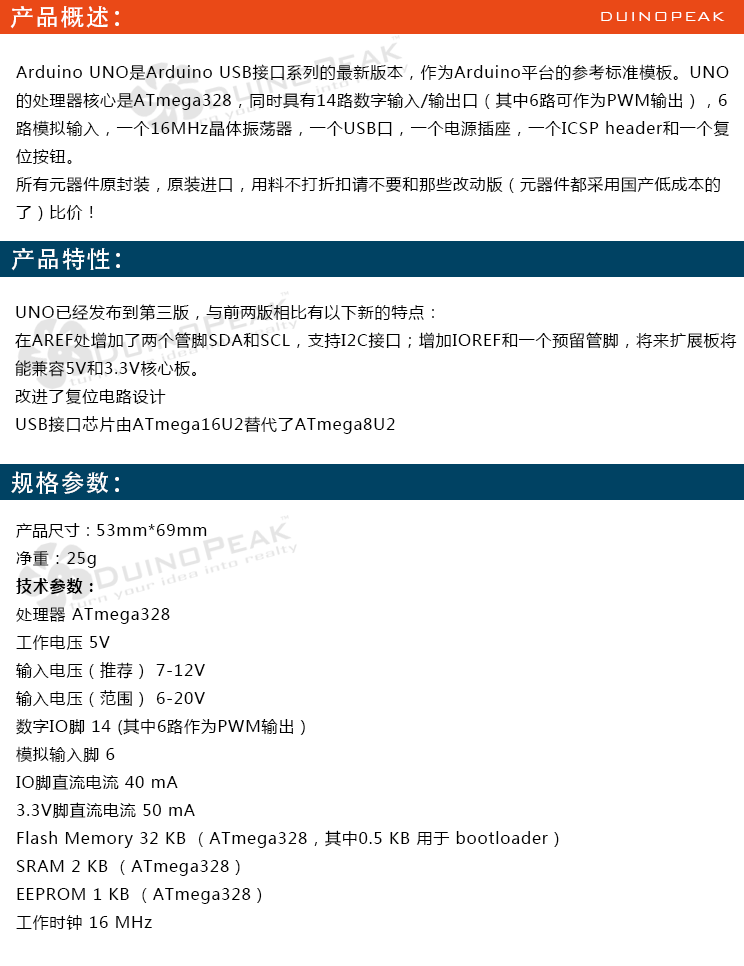
<style>
.page{position:relative;width:744px;height:966px;background:#ffffff}
.page>*{position:absolute;margin:0}
.t1{font:24px "AdobeHeitiStd-Regular";letter-spacing:0.05em;color:#ffffff}
.t2{font:18px "BankGothicBT-Light";letter-spacing:0.05em;color:#ffffff}
.t3{font:16px "MicrosoftYaHei";letter-spacing:0.05em;color:#000000}
.t4{font:16px "MicrosoftYaHei";color:#000000}
.t5{font:16px "MicrosoftYaHei-Bold";letter-spacing:0.05em;color:#000000}
</style>
<div class="page">
<p class="t1" style="left:10px;top:6px;width:109px;height:23px">产品概述：</p>
<p class="t2" style="left:601px;top:12px;width:124px;height:9px">DUINOPEAK</p>
<p class="t3" style="left:16px;top:64px;width:713px;height:157px">Arduino UNO是Arduino USB接口系列的最新版本，作为Arduino平台的参考标准模板。UNO<br>的处理器核心是ATmega328，同时具有14路数字输入/输出口（其中6路可作为PWM输出），6<br>路模拟输入，一个16MHz晶体振荡器，一个USB口，一个电源插座，一个ICSP header和一个复<br>位按钮。<br>所有元器件原封装，原装进口，用料不打折扣请不要和那些改动版（元器件都采用国产低成本的<br>了）比价！</p>
<p class="t1" style="left:11px;top:247px;width:109px;height:24px">产品特性：</p>
<p class="t3" style="left:15px;top:304px;width:722px;height:130px">UNO已经发布到第三版，与前两版相比有以下新的特点：<br>在AREF处增加了两个管脚SDA和SCL，支持I2C接口；增加IOREF和一个预留管脚，将来扩展板将<br>能兼容5V和3.3V核心板。<br>改进了复位电路设计<br>USB接口芯片由ATmega16U2替代了ATmega8U2</p>
<p class="t1" style="left:11px;top:471px;width:108px;height:23px">规格参数：</p>
<p class="t3" style="left:16px;top:523px;width:543px;height:407px"><span class="t4">产品尺寸：</span>53mm*69mm<br>净重：25g<br><span class="t5">技术参数：<br></span>处理器 ATmega328<br>工作电压 5V<br>输入电压（推荐） 7-12V<br>输入电压（范围） 6-20V<br>数字IO脚 14 (其中6路作为PWM输出）<br>模拟输入脚 6<br>IO脚直流电流 40 mA<br>3.3V脚直流电流 50 mA<br>Flash Memory 32 KB （ATmega328，其中0.5 KB 用于 bootloader）<br>SRAM 2 KB （ATmega328）<br>EEPROM 1 KB （ATmega328）<br>工作时钟 16 MHz</p>
</div>
